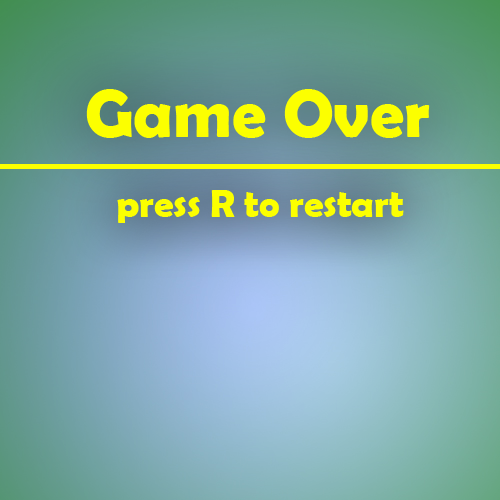
<style>
.page{position:relative;width:500px;height:500px}
.page>*{position:absolute;margin:0}
.t1{font:67.6px "BerlinSansFBDemi-Bold";color:#fcff00}
.t2{font:38.5px "BerlinSansFBDemi-Bold";color:#fcff00}
</style>
<div class="page">
<p class="t1" style="left:86px;top:89px;width:344px;height:49px">Game Over</p>
<p class="t2" style="left:117px;top:190px;width:287px;height:33px">press R to restart</p>
</div>
